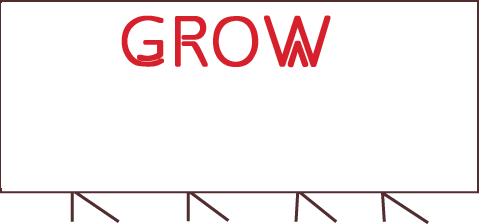
<style>
.page{position:relative;width:479px;height:224px;background:#ffffff}
.page>*{position:absolute;margin:0}
.t1{font:72px "SSAdec";letter-spacing:-0.005em;color:#d6202b;font-weight:bold}
</style>
<div class="page">
<p class="t1" style="left:121px;top:15px;width:210px;height:53px">grow</p>
</div>
